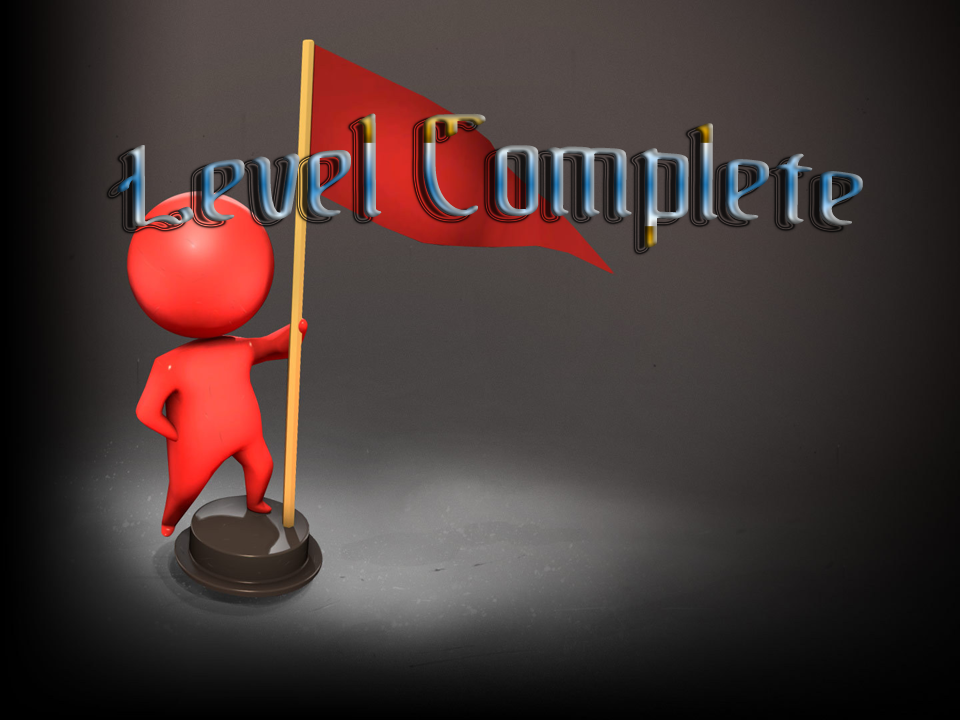
<style>
.page{position:relative;width:960px;height:720px}
.page>*{position:absolute;margin:0}
.t1{font:100px "!TheBlackBloc"}
</style>
<div class="page">
<p class="t1" style="left:117px;top:113px;width:746px;height:135px">Level Complete</p>
</div>
